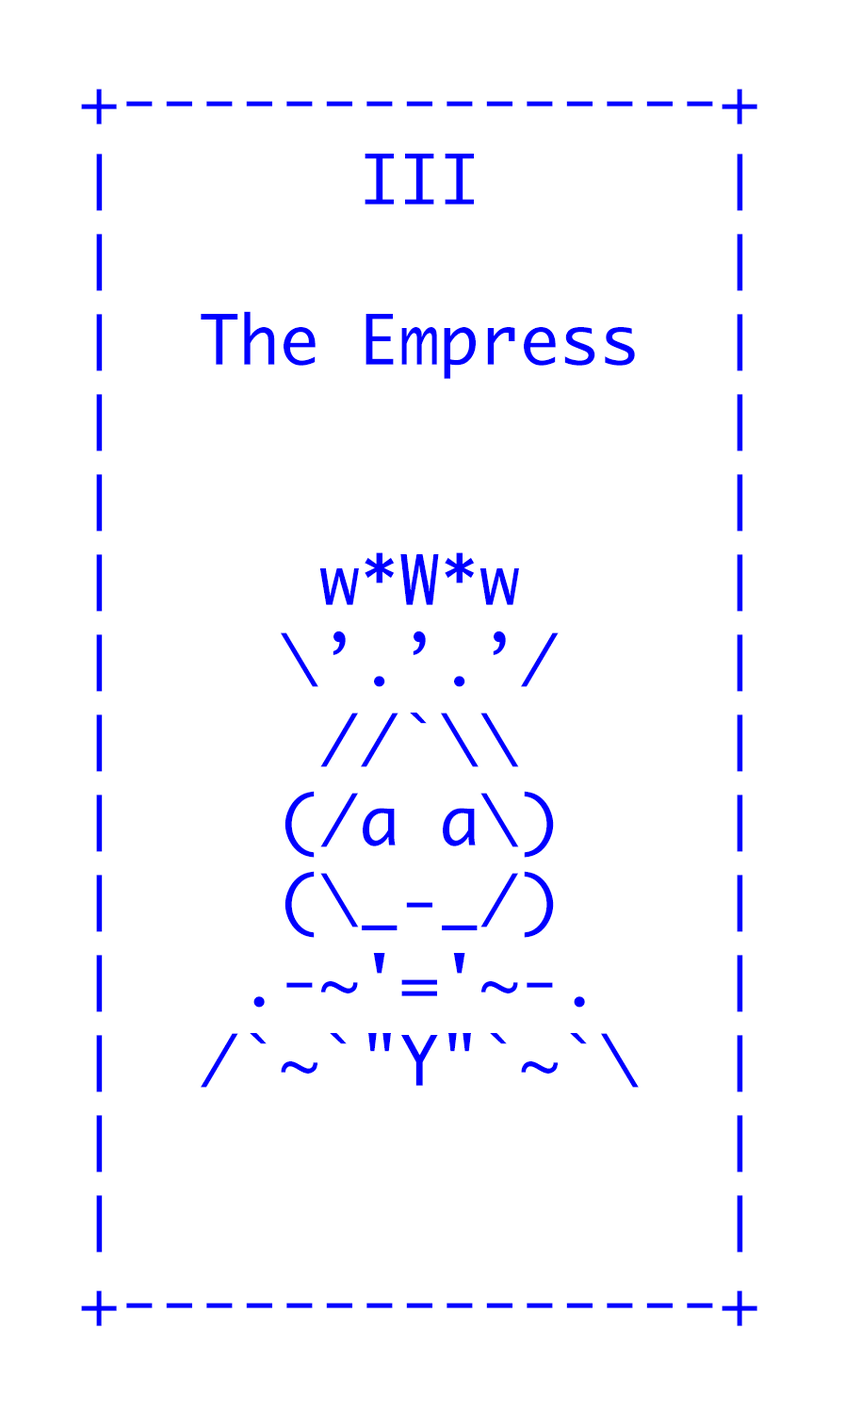
<style>
.page{position:relative;width:845px;height:1411px;background:#ffffff}
.page>*{position:absolute;margin:0}
.t1{font:66.7px "Monaco";color:#0000ff}
</style>
<div class="page">
<p class="t1" style="left:81px;top:89px;width:677px;height:1237px">+---------------+<br>│      III      │<br>│               │<br>│  The Empress  │<br>│               │<br>│               │<br>│     w*W*w     │<br>│    \’.’.’/    │<br>│     //`\\     │ <br>│    (/a a\)    │ <br>│    (\_-_/)    │ <br>│   .-~'='~-.   │ <br>│  /`~`"Y"`~`\  │ <br>│               │<br>│               │<br>+---------------+</p>
</div>
